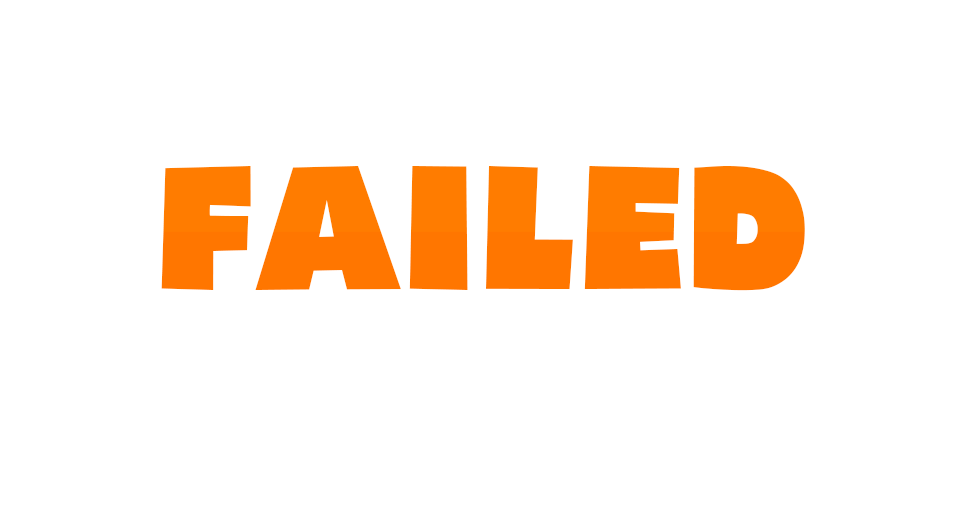
<style>
.page{position:relative;width:960px;height:512px;background:#ffffff}
.page>*{position:absolute;margin:0}
.t1{font:166.7px "Bumpo";color:#ff7b00}
</style>
<div class="page">
<p class="t1" style="left:161px;top:166px;width:644px;height:125px">FAILED</p>
</div>
